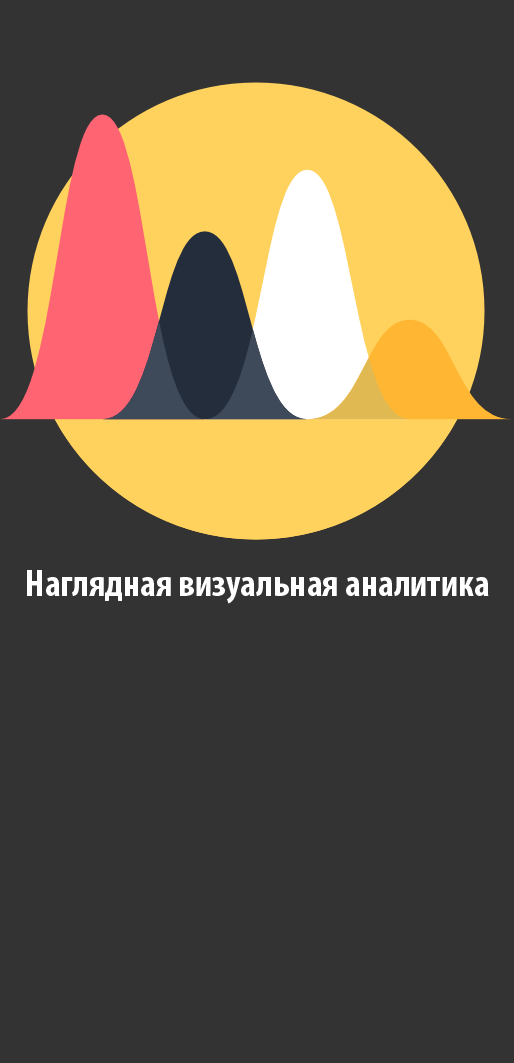
<style>
.page{position:relative;width:514px;height:1063px;background:#333333}
.page>*{position:absolute;margin:0}
.t1{font:37.5px "MyriadPro-BoldCond";color:#ffffff}
</style>
<div class="page">
<p class="t1" style="left:27px;top:570px;width:462px;height:34px">Наглядная визуальная аналитика</p>
</div>
